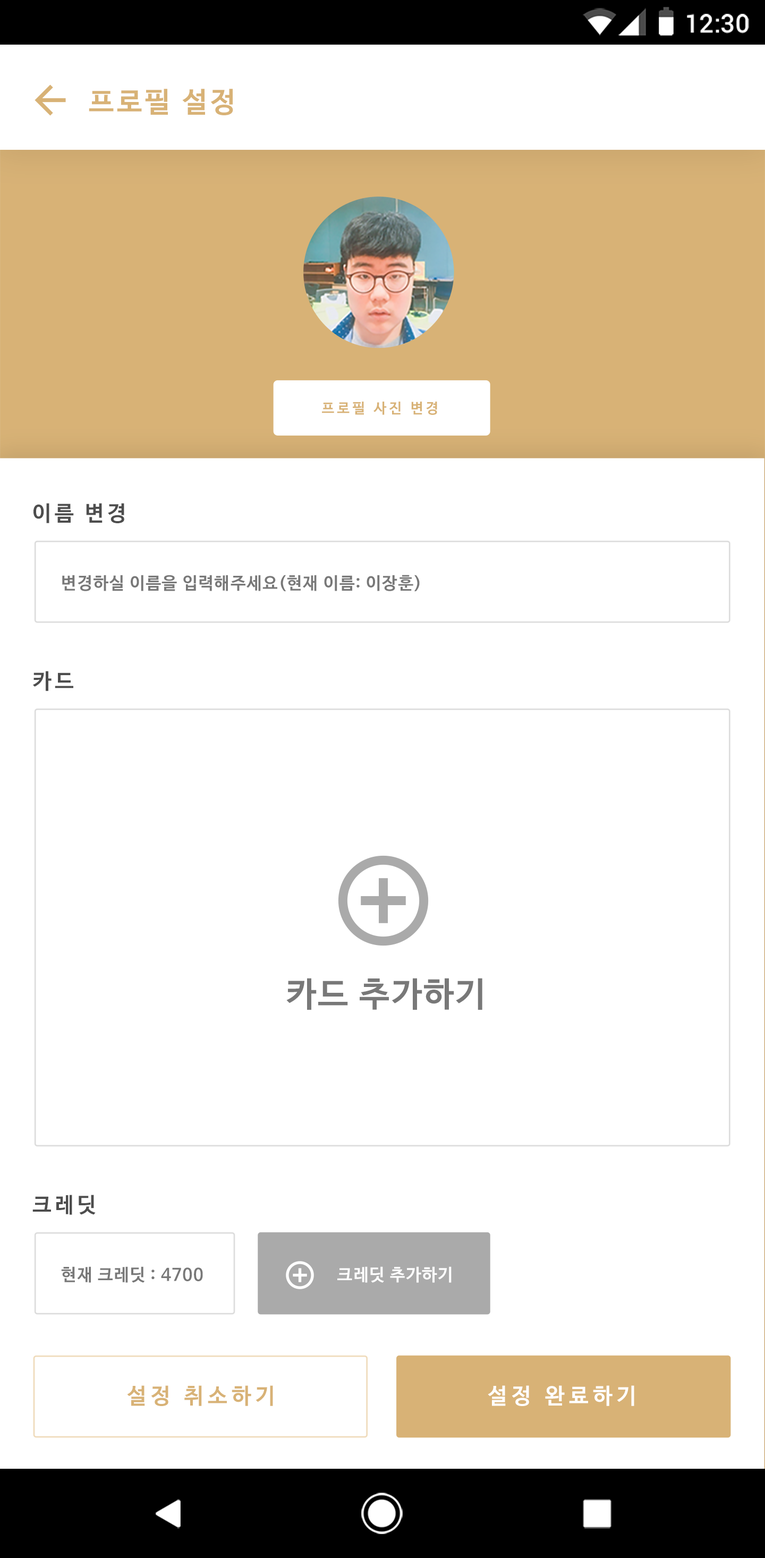
<style>
.page{position:relative;width:765px;height:1558px;background:#ffffff}
.page>*{position:absolute;margin:0}
.t1{font:25.5px "Roboto-Medium";color:#ffffff}
.t2{font:28.3px "NanumBarunGothicBold";letter-spacing:0.1em;color:#d8b276}
.t3{font:14.2px "NanumBarunGothicBold";letter-spacing:0.2em;color:#d8b276}
.t4{font:21.3px "NanumBarunGothicBold";letter-spacing:0.16em;color:#4d4d4d}
.t5{font:17px "NanumBarunGothicBold";letter-spacing:0.05em;color:#787878}
.t6{font:34px "NanumBarunGothicBold";letter-spacing:0.05em;color:#787878}
.t7{font:17px "NanumBarunGothicBold";letter-spacing:0.05em;color:#ffffff}
.t8{font:22px "NanumBarunGothicBold";letter-spacing:0.2em;color:#d8b276}
.t9{font:22px "NanumBarunGothicBold";letter-spacing:0.2em;color:#ffffff}
</style>
<div class="page">
<p class="t1" style="left:687px;top:14px;width:62px;height:19px">12:30</p>
<p class="t2" style="left:89px;top:89px;width:144px;height:26px">프로필 설정</p>
<p class="t3" style="left:322px;top:402px;width:115px;height:13px">프로필 사진 변경</p>
<p class="t4" style="left:33px;top:503px;width:91px;height:20px">이름 변경</p>
<p class="t5" style="left:62px;top:575px;width:358px;height:16px">변경하실 이름을 입력해주세요(현재 이름: 이장훈)</p>
<p class="t4" style="left:33px;top:671px;width:40px;height:20px">카드</p>
<p class="t6" style="left:286px;top:978px;width:196px;height:32px">카드 추가하기</p>
<p class="t4" style="left:32px;top:1195px;width:64px;height:20px">크레딧</p>
<p class="t5" style="left:61px;top:1267px;width:142px;height:16px">현재 크레딧 : 4700</p>
<p class="t7" style="left:337px;top:1267px;width:115px;height:16px">크레딧 추가하기</p>
<p class="t8" style="left:127px;top:1386px;width:146px;height:20px">설정 취소하기</p>
<p class="t9" style="left:488px;top:1386px;width:146px;height:20px">설정 완료하기</p>
</div>
